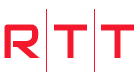
<style>
.page{position:relative;width:140px;height:84px;background:#ffffff}
.page>*{position:absolute;margin:0}
.t1{font:48px "Audiowide-Regular";letter-spacing:0.26em;color:#f3182c}
</style>
<div class="page">
<p class="t1" style="left:4px;top:24px;width:130px;height:34px">RTT</p>
</div>
